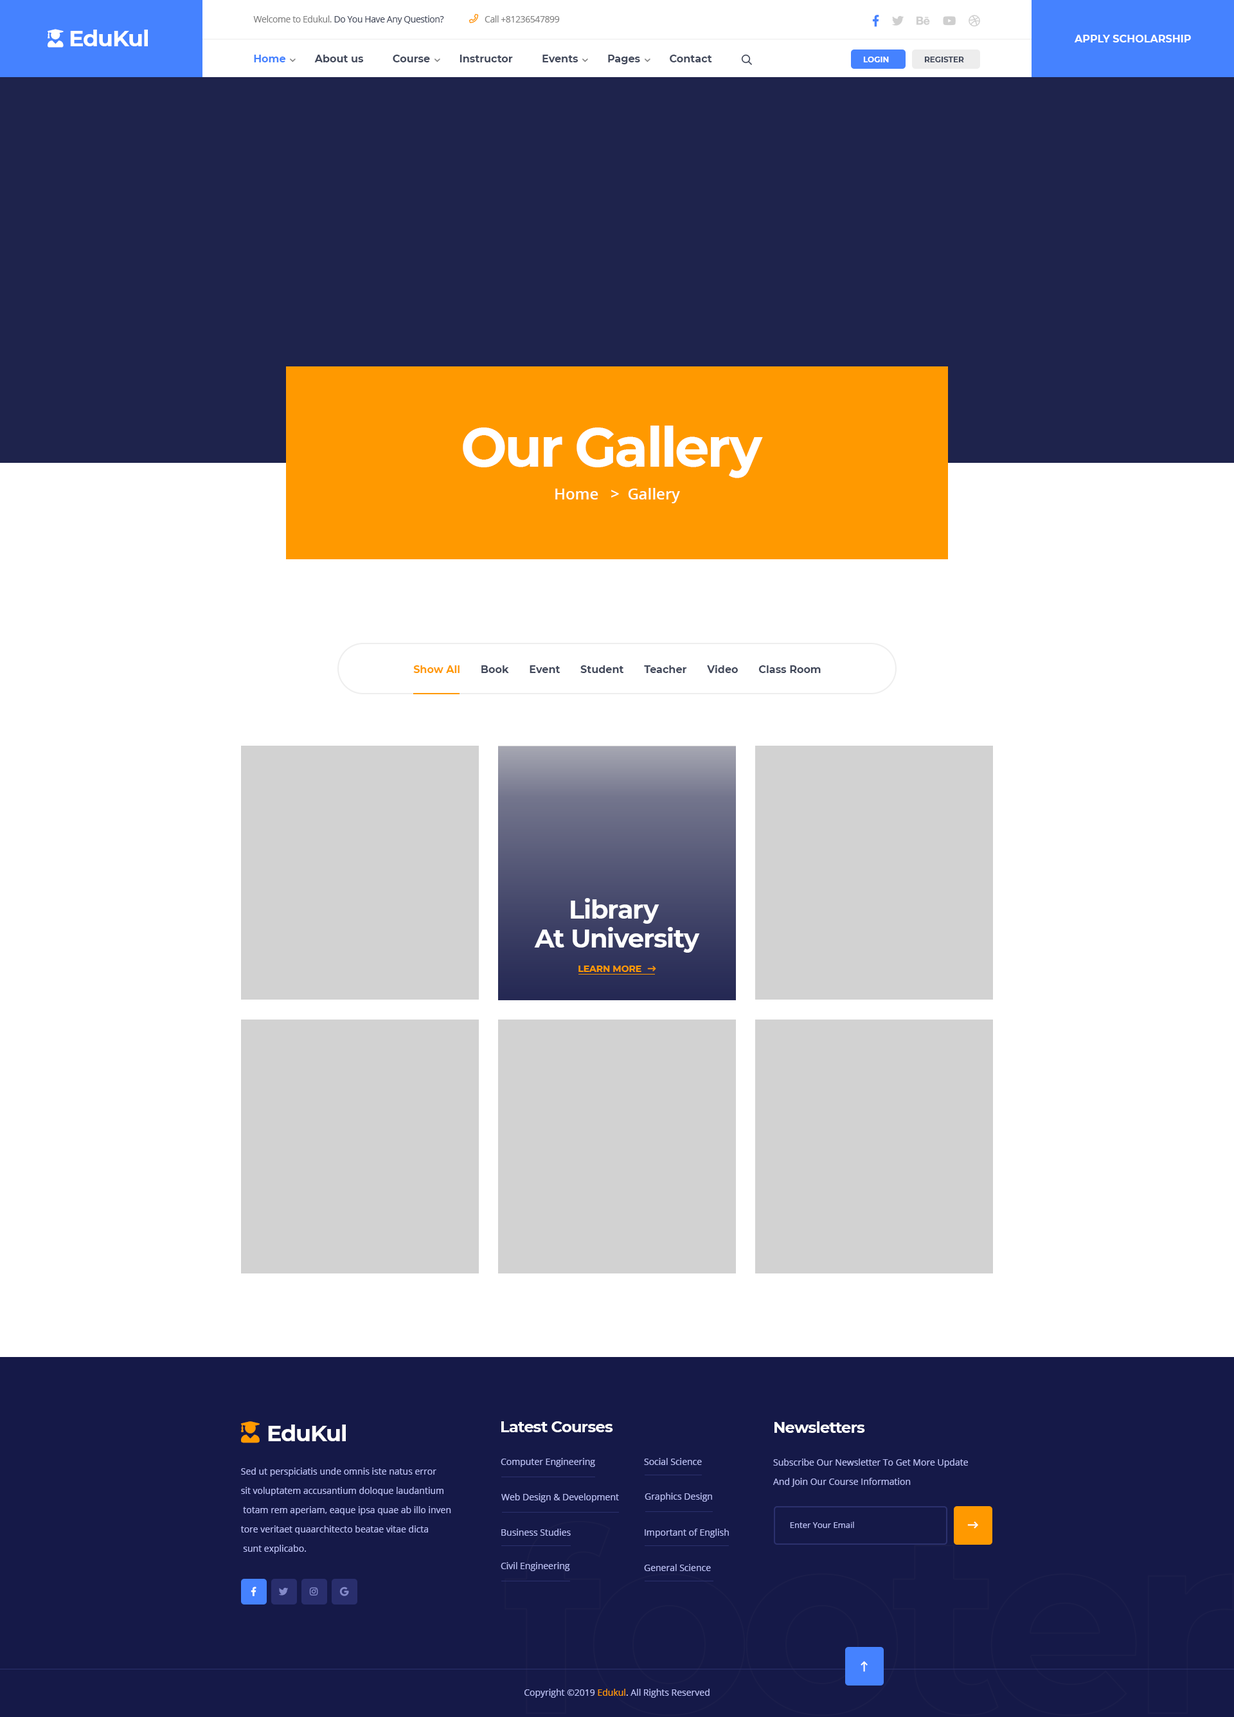
<style>
.page{position:relative;width:1234px;height:1717px;background:#ffffff}
.page>*{position:absolute;margin:0}
.t1{font:9px "OpenSans-Regular";letter-spacing:-0.03em;color:#42495b}
.t2{font:9px "OpenSans-Regular";letter-spacing:-0.03em;color:#808080}
.t3{font:22.5px "Montserrat-Bold";letter-spacing:-0.03em;color:#ffffff}
.t4{font:10.3px "Montserrat-Bold";color:#ffffff;text-transform:uppercase}
.t5{font:10.3px "Montserrat-Bold";color:#42495b}
.t6{font:10.3px "Montserrat-Bold";color:#4582ff}
.t7{font:7.7px "Montserrat-Bold";color:#ffffff;text-transform:uppercase}
.t8{font:7.7px "Montserrat-Bold";color:#42495b;text-transform:uppercase}
.t9{font:54.6px "Montserrat-Bold";letter-spacing:-0.04em;color:#ffffff}
.t10{font:15.4px "OpenSans-SemiBold";color:#ffffff}
.t11{font:10.3px "Montserrat-Bold";color:#ff9900}
.t12{font:25.7px/28.9px "Montserrat-Bold";letter-spacing:-0.03em;color:#ffffff}
.t13{font:9px "Montserrat-Bold";color:#ff9900;text-transform:uppercase}
.t14{font:15.4px "Montserrat-Bold";letter-spacing:-0.03em;color:#ffffff}
.t15{font:9px/19.3px "OpenSans-Regular";color:#b8bdf2}
.t16{font:9px "OpenSans-Regular";color:#b8bdf2}
.t17{font:8.4px "OpenSans-Regular";color:#b8bdf2}
.t18{font:9px "OpenSans-Regular";color:#ff9900}
.t19{font:9px "OpenSans-Regular";color:#d3cfff}
</style>
<div class="page">
<p class="t1" style="left:253px;top:15px;width:191px;height:9px"><span class="t2">Welcome to Edukul. </span>Do You Have Any Question?</p>
<p class="t2" style="left:485px;top:15px;width:75px;height:7px">Call +81236547899</p>
<p class="t3" style="left:70px;top:30px;width:78px;height:16px">EduKul</p>
<p class="t4" style="left:1074px;top:35px;width:117px;height:7px">Apply scholarship</p>
<p class="t5" style="left:254px;top:55px;width:458px;height:9px"><span class="t6">Home</span>          About us          Course          Instructor          Events          Pages          Contact</p>
<p class="t7" style="left:863px;top:57px;width:26px;height:5px">login</p>
<p class="t8" style="left:924px;top:57px;width:40px;height:5px">register</p>
<p class="t9" style="left:463px;top:426px;width:300px;height:52px">Our Gallery</p>
<p class="t10" style="left:555px;top:488px;width:125px;height:15px">Home   &gt;  Gallery</p>
<p class="t5" style="left:413px;top:665px;width:408px;height:8px"><span class="t11">Show All</span>       Book       Event       Student       Teacher       Video       Class Room</p>
<p class="t12" style="left:534px;top:898px;width:166px;height:55px;text-align:center">Library <br>At University</p>
<p class="t13" style="left:579px;top:966px;width:63px;height:6px">learn more</p>
<p class="t14" style="left:501px;top:1421px;width:112px;height:11px">Latest Courses</p>
<p class="t14" style="left:775px;top:1421px;width:90px;height:12px">Newsletters</p>
<p class="t3" style="left:268px;top:1425px;width:78px;height:16px">EduKul</p>
<p class="t15" style="left:240px;top:1468px;width:211px;height:86px">Sed ut perspiciatis unde omnis iste natus error <br>sit voluptatem accusantium doloque laudantium<br> totam rem aperiam, eaque ipsa quae ab illo inven<br>tore veritaet quaarchitecto beatae vitae dicta<br> sunt explicabo. <br>Nemo enim ipsam voluptatem quia</p>
<p class="t16" style="left:501px;top:1458px;width:94px;height:9px">Computer Engineering</p>
<p class="t16" style="left:644px;top:1458px;width:58px;height:7px">Social Science</p>
<p class="t15" style="left:773px;top:1459px;width:195px;height:28px">Subscribe Our Newsletter To Get More Update<br>And Join Our Course Information</p>
<p class="t16" style="left:501px;top:1493px;width:118px;height:9px">Web Design &amp; Development</p>
<p class="t16" style="left:645px;top:1493px;width:67px;height:9px">Graphics Design</p>
<p class="t16" style="left:501px;top:1529px;width:70px;height:7px">Business Studies</p>
<p class="t16" style="left:645px;top:1529px;width:84px;height:9px">Important of English</p>
<p class="t17" style="left:790px;top:1522px;width:64px;height:6px">Enter Your Email</p>
<p class="t16" style="left:501px;top:1562px;width:69px;height:9px">Civil Engineering</p>
<p class="t16" style="left:644px;top:1564px;width:67px;height:7px">General Science</p>
<p class="t16" style="left:525px;top:1689px;width:185px;height:9px">Copyright ©2019 <span class="t18">Edukul</span><span class="t19">. </span>All Rights Reserved</p>
</div>
